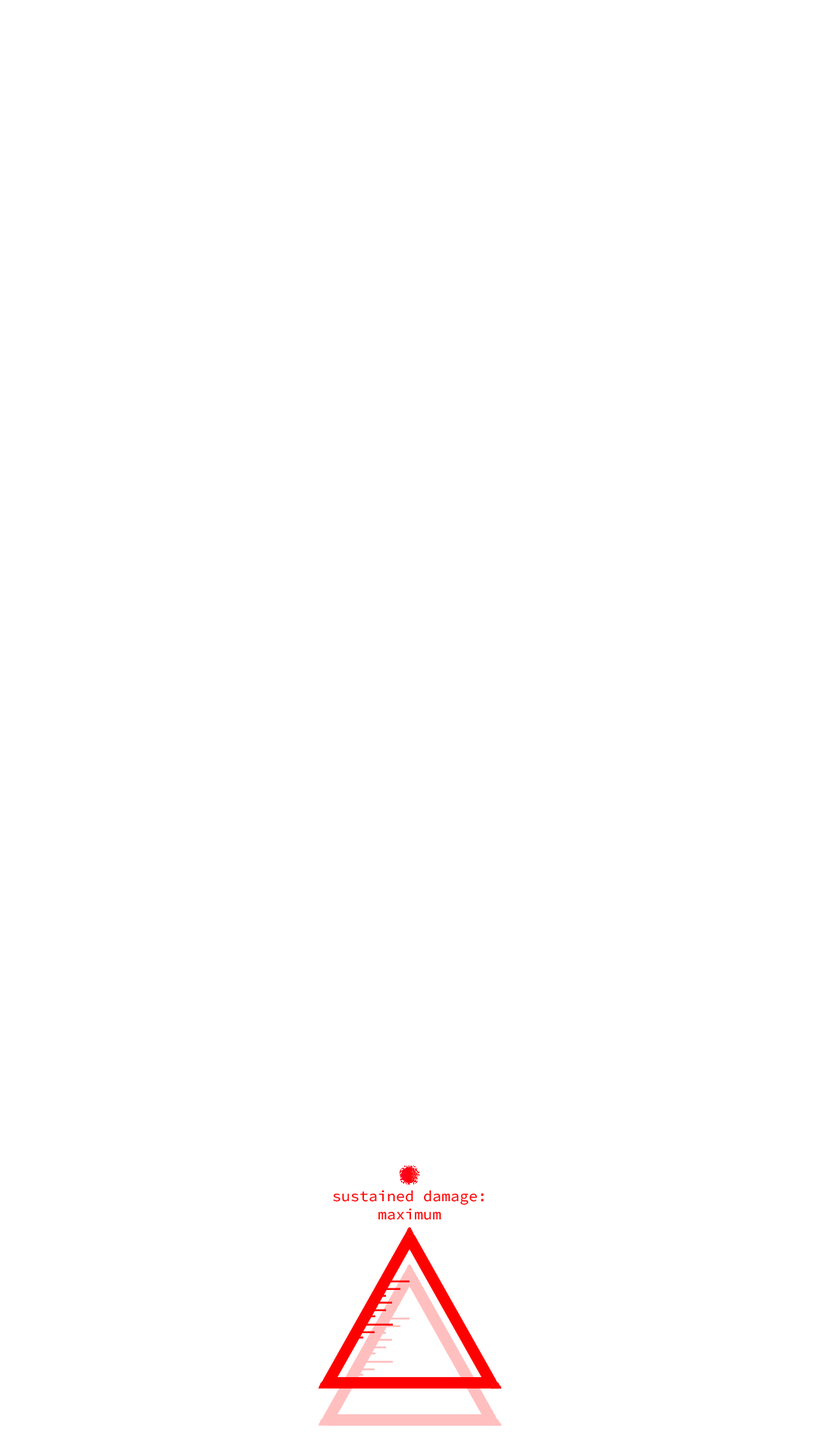
<style>
.page{position:relative;width:819px;height:1456px;background:#ffffff}
.page>*{position:absolute;margin:0}
.t1{font:15.2px "SourceCodeVariable-Roman";color:#ff0000}
</style>
<div class="page">
<p class="t1" style="left:333px;top:1190px;width:151px;height:30px;text-align:center">sustained damage: <br>maximum</p>
</div>
